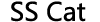
<style>
.page{position:relative;width:100px;height:22px;background:#ffffff}
.page>*{position:absolute;margin:0}
.t1{font:25px "MicrosoftYaHei";color:#000000}
</style>
<div class="page">
<p class="t1" style="left:11px;top:1px;width:75px;height:21px">SS Cat</p>
</div>
